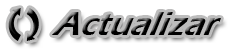
<style>
.page{position:relative;width:234px;height:50px;background:#ffffff}
.page>*{position:absolute;margin:0}
.t1{font:36.2px "ErasITC-Demi";color:#000000;scale:0.94 1}
</style>
<div class="page">
<p class="t1" style="left:52px;top:12px;width:169px;height:23px">Actualizar</p>
</div>
